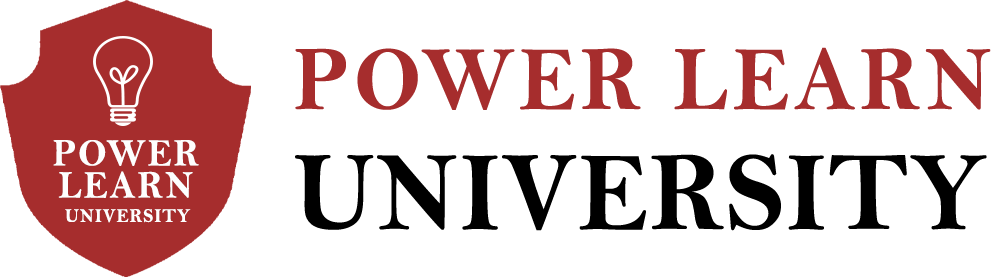
<style>
.page{position:relative;width:991px;height:277px;background:#ffffff}
.page>*{position:absolute;margin:0}
.t1{font:91.8px/158px "BellMTBold";letter-spacing:0.05em;color:#a62d2d;text-transform:uppercase;scale:0.95 1}
.t2{font:113px/156px "BellMTBold";letter-spacing:0.01em;color:#000000;text-transform:uppercase;scale:0.95 1}
.t3{font:19.3px/31.7px "BellMTBold";letter-spacing:0.05em;color:#fefefe;text-transform:uppercase;scale:0.95 1}
.t4{font:38.6px/32.1px "BellMTBold";letter-spacing:0.05em;color:#fefefe;text-transform:uppercase;scale:0.95 1}
.t5{font:38.9px/32.1px "BellMTBold";letter-spacing:0.05em;color:#fefefe;text-transform:uppercase;scale:0.95 1}
</style>
<div class="page">
<p class="t1" style="left:295px;top:47px;width:696px;height:184px">power learn<br><span class="t2">university</span></p>
<p class="t3" style="left:53px;top:140px;width:146px;height:83px;text-align:center"><span class="t4">power<br></span><span class="t5">learn<br></span>university</p>
</div>
